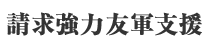
<style>
.page{position:relative;width:207px;height:49px;background:#ffffff}
.page>*{position:absolute;margin:0}
.t1{font:24px "RyuminPr6N-ExBold";color:#343434;font-weight:bold}
</style>
<div class="page">
<p class="t1" style="left:6px;top:12px;width:196px;height:24px">請求強力友軍支援</p>
</div>
